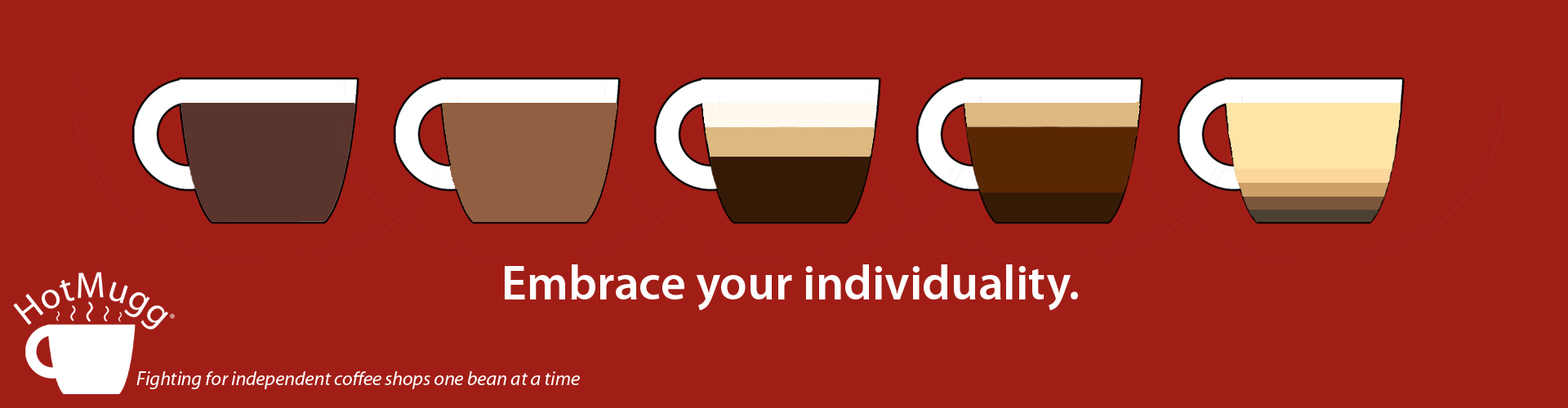
<style>
.page{position:relative;width:1568px;height:408px;background:#a11e17}
.page>*{position:absolute;margin:0}
.t1{font:49px "MyriadPro-Semibold";color:#ffffff}
.t2{font:19.6px "MyriadPro-It";color:#ffffff}
</style>
<div class="page">
<p class="t1" style="left:505px;top:265px;width:573px;height:46px">Embrace your individuality.</p>
<p class="t2" style="left:136px;top:372px;width:444px;height:18px">Fighting for independent coffee shops one bean at a time</p>
</div>
